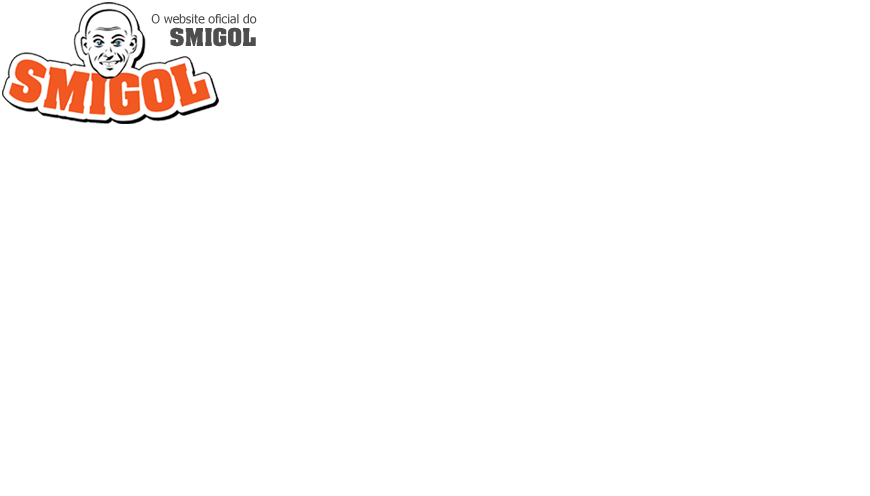
<style>
.page{position:relative;width:870px;height:496px;background:#ffffff}
.page>*{position:absolute;margin:0}
.t1{font:12.2px/22.6px "Tahoma";color:#4e4e4e}
.t2{font:20.9px/22.6px "AachenStd-Bold";color:#4e4e4e}
</style>
<div class="page">
<p class="t1" style="left:151px;top:14px;width:106px;height:33px;text-align:right">O website oficial do<br><span class="t2">SMIGOL</span></p>
</div>
